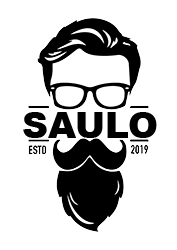
<style>
.page{position:relative;width:177px;height:250px;background:#ffffff}
.page>*{position:absolute;margin:0}
.t1{font:36px "Arial-Black";color:#000000}
</style>
<div class="page">
<p class="t1" style="left:23px;top:112px;width:134px;height:26px">SAULO</p>
</div>
